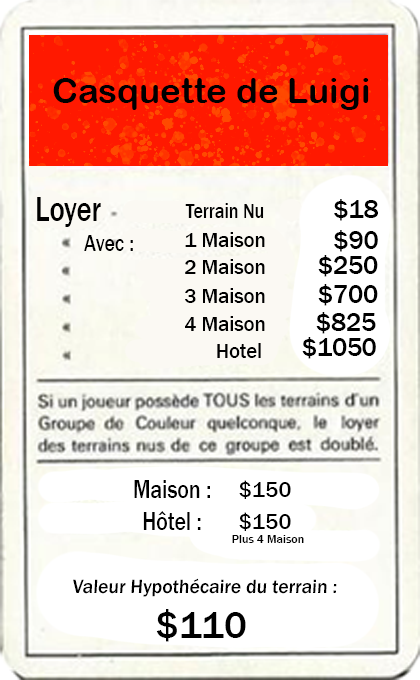
<style>
.page{position:relative;width:420px;height:680px;background:#ffffff}
.page>*{position:absolute;margin:0}
.t1{font:35px "ArialRoundedMTBold";color:#000000}
.t2{font:34.8px "FranklinGothic-Medium";color:#000000;scale:0.82 1}
.t3{font:20.8px "FranklinGothic-Medium";color:#000000;scale:0.86 1}
.t4{font:25.5px "FranklinGothic-Medium";color:#000000}
.t5{font:20.6px "FranklinGothic-Medium";color:#000000}
.t6{font:23.4px "FranklinGothic-Medium";color:#000000;scale:0.85 1}
.t7{font:26.2px "FranklinGothic-Medium";color:#000000;scale:0.83 1}
.t8{font:22.5px "FranklinGothic-Medium";color:#000000}
.t9{font:12px "FranklinGothic-Medium";color:#000000}
.t10{font:19.7px "FranklinGothic-Medium";color:#000000}
.t11{font:38.6px "FranklinGothic-Medium";color:#000000}
</style>
<div class="page">
<p class="t1" style="left:53px;top:78px;width:316px;height:32px">Casquette de Luigi</p>
<p class="t2" style="left:37px;top:197px;width:64px;height:30px">Loyer</p>
<p class="t3" style="left:185px;top:203px;width:79px;height:15px">Terrain Nu</p>
<p class="t4" style="left:334px;top:199px;width:44px;height:22px">$18</p>
<p class="t5" style="left:185px;top:232px;width:80px;height:15px">1 Maison</p>
<p class="t4" style="left:334px;top:230px;width:44px;height:22px">$90</p>
<p class="t6" style="left:84px;top:235px;width:49px;height:16px">Avec :</p>
<p class="t4" style="left:318px;top:255px;width:60px;height:22px">$250</p>
<p class="t5" style="left:185px;top:259px;width:80px;height:15px">2 Maison</p>
<p class="t5" style="left:185px;top:288px;width:80px;height:15px">3 Maison</p>
<p class="t4" style="left:318px;top:284px;width:60px;height:22px">$700</p>
<p class="t5" style="left:185px;top:316px;width:80px;height:15px">4 Maison</p>
<p class="t4" style="left:316px;top:312px;width:60px;height:22px">$825</p>
<p class="t4" style="left:302px;top:337px;width:74px;height:22px">$1050</p>
<p class="t5" style="left:217px;top:343px;width:44px;height:15px">Hotel</p>
<p class="t7" style="left:134px;top:480px;width:76px;height:18px">Maison :</p>
<p class="t8" style="left:239px;top:480px;width:52px;height:19px">$150</p>
<p class="t7" style="left:143px;top:511px;width:58px;height:19px">Hôtel :</p>
<p class="t8" style="left:239px;top:512px;width:52px;height:19px">$150</p>
<p class="t9" style="left:232px;top:535px;width:72px;height:8px">Plus 4 Maison</p>
<p class="t10" style="left:73px;top:578px;width:264px;height:19px">Valeur Hypothécaire du terrain :</p>
<p class="t11" style="left:156px;top:609px;width:90px;height:33px">$110</p>
</div>
